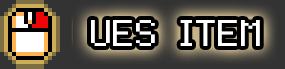
<style>
.page{position:relative;width:285px;height:69px}
.page>*{position:absolute;margin:0}
.t1{font:52px "Silver";color:#ffffff;scale:1.3 1}
</style>
<div class="page">
<p class="t1" style="left:91px;top:20px;width:169px;height:26px">UES ITEM</p>
</div>
